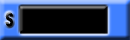
<style>
.page{position:relative;width:130px;height:40px;background:#000000}
.page>*{position:absolute;margin:0}
.t1{font:18px "GothicXB-HM";scale:0.87 1}
</style>
<div class="page">
<p class="t1" style="left:5px;top:12px;width:8px;height:15px">S</p>
</div>
